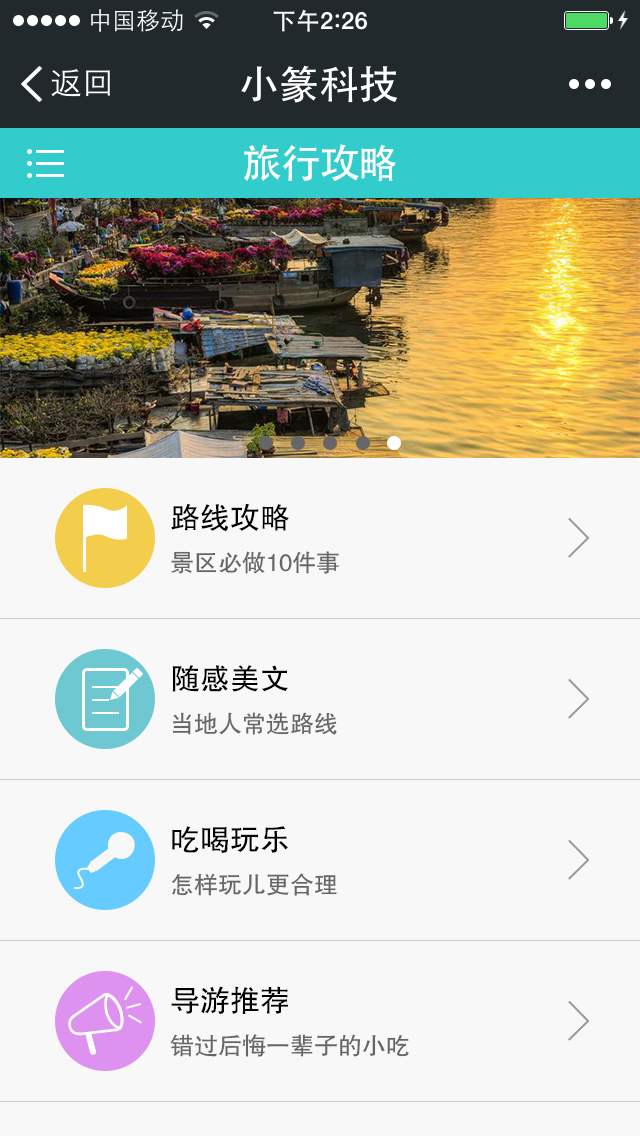
<style>
.page{position:relative;width:640px;height:1136px;background:#f8f8f8}
.page>*{position:absolute;margin:0}
.t1{font:40px "AdobeHeitiStd-Regular";color:#ffffff}
.t2{font:24px/48px "FZHTJW--GB1-0";color:#666666}
.t3{font:30px/48px "FZHTJW--GB1-0";color:#000000}
</style>
<div class="page">
<p class="t1" style="left:244px;top:144px;width:152px;height:37px">旅行攻略</p>
<p class="t2" style="left:171px;top:503px;width:168px;height:71px"><span class="t3">路线攻略<br></span>景区必做10件事</p>
<p class="t2" style="left:172px;top:665px;width:165px;height:70px"><span class="t3">随感美文<br></span>当地人常选路线</p>
<p class="t2" style="left:171px;top:826px;width:166px;height:70px"><span class="t3">吃喝玩乐<br></span>怎样玩儿更合理</p>
<p class="t2" style="left:170px;top:986px;width:239px;height:71px"><span class="t3">导游推荐<br></span>错过后悔一辈子的小吃</p>
</div>
